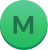
<style>
.page{position:relative;width:48px;height:50px}
.page>*{position:absolute;margin:0}
.t1{font:24.2px "Lato-Black";color:#22724a}
</style>
<div class="page">
<p class="t1" style="left:13px;top:16px;width:21px;height:18px">M</p>
</div>
